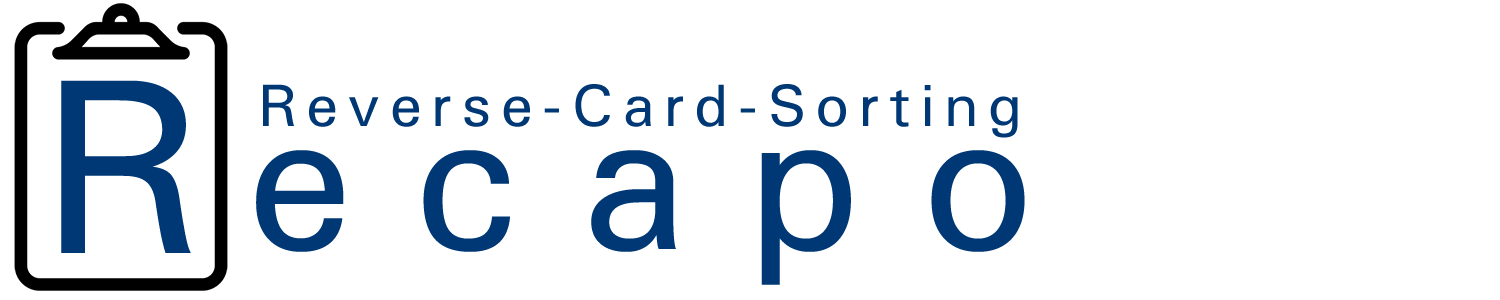
<style>
.page{position:relative;width:1500px;height:300px;background:#ffffff}
.page>*{position:absolute;margin:0}
.t1{font:250px "Univers-Medium";letter-spacing:0.3em;color:#003876}
.t2{font:60px "Univers-Medium";letter-spacing:0.155em;color:#003876}
.t3{font:200px "Univers-Medium";letter-spacing:0.3em;color:#003876}
</style>
<div class="page">
<p class="t1" style="left:61px;top:80px;width:130px;height:173px">R</p>
<p class="t2" style="left:263px;top:84px;width:755px;height:54px">Reverse-Card-Sorting</p>
<p class="t3" style="left:256px;top:150px;width:769px;height:135px">ecapo</p>
</div>
